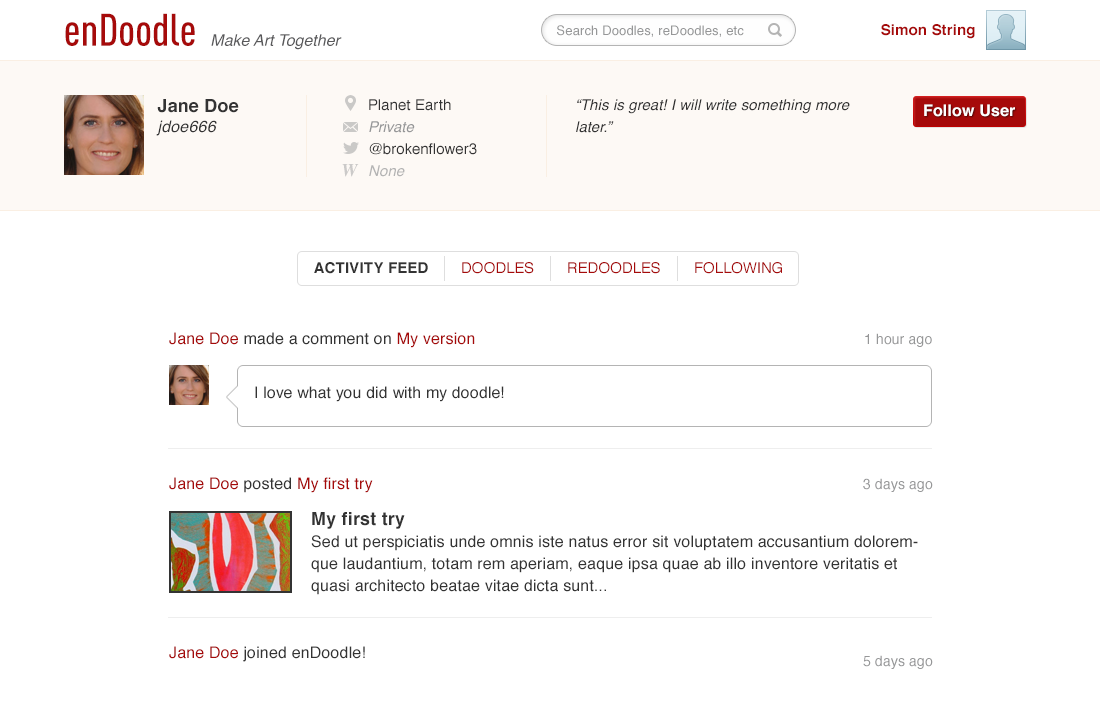
<style>
.page{position:relative;width:1100px;height:703px;background:#ffffff}
.page>*{position:absolute;margin:0}
.t1{font:45px "DINCond-Medium";color:#a60a0a}
.t2{font:13px "Helvetica";letter-spacing:0.01em;color:#969798}
.t3{font:15px "Helvetica-Bold";letter-spacing:0.01em;color:#a60a0a}
.t4{font:16px "Helvetica-Oblique";color:#59595b}
.t5{font:18px "Helvetica-Bold";letter-spacing:0.01em;color:#333333}
.t6{font:16px/20px "Helvetica-Oblique";letter-spacing:0.01em;color:#333333}
.t7{font:15px/22px "Helvetica";letter-spacing:0.01em;color:#333333}
.t8{font:15px/22px "Helvetica-Oblique";letter-spacing:0.01em;color:#969798}
.t9{font:15px/22px "Helvetica-Oblique";letter-spacing:0.01em;color:#b4b4b4}
.t10{font:15px/22px "Helvetica-Oblique";letter-spacing:0.01em;color:#333333}
.t11{font:16px "Helvetica-Bold";letter-spacing:0.01em;color:#ffffff}
.t12{font:18px "Times-BoldItalic";letter-spacing:0.01em;color:#b4b4b4}
.t13{font:15px "Helvetica-Bold";letter-spacing:0.01em;color:#333333}
.t14{font:15px "Helvetica";letter-spacing:0.01em;color:#a60a0a}
.t15{font:16px "Helvetica";letter-spacing:0.01em;color:#333333}
.t16{font:16px "Helvetica";letter-spacing:0.01em;color:#a60a0a}
.t17{font:14px "Helvetica";letter-spacing:0.01em;color:#969798}
.t18{font:16px/22px "Helvetica";letter-spacing:0.01em;color:#333333}
.t19{font:18px/24px "Helvetica-Bold";letter-spacing:0.01em;color:#333333}
</style>
<div class="page">
<p class="t1" style="left:65px;top:13px;width:130px;height:33px">enDoodle</p>
<p class="t2" style="left:557px;top:25px;width:187px;height:12px">Search Doodles, reDoodles, etc</p>
<p class="t3" style="left:881px;top:24px;width:94px;height:15px">Simon String</p>
<p class="t4" style="left:211px;top:34px;width:131px;height:16px">Make Art Together</p>
<p class="t5" style="left:156px;top:99px;width:83px;height:37px">Jane Doe<br><span class="t6">jdoe666</span></p>
<p class="t7" style="left:369px;top:99px;width:108px;height:78px">Planet Earth<br><span class="t8">Private<br></span>@brokenflower3<br><span class="t9">None</span></p>
<p class="t10" style="left:576px;top:99px;width:274px;height:34px">“This is great! I will write something more<br>later.”</p>
<p class="t11" style="left:924px;top:104px;width:91px;height:13px">Follow User</p>
<p class="t12" style="left:342px;top:164px;width:17px;height:13px;opacity:0.7">W</p>
<p class="t13" style="left:314px;top:262px;width:114px;height:12px">ACTIVITY FEED</p>
<p class="t14" style="left:462px;top:262px;width:72px;height:12px">DOODLES</p>
<p class="t14" style="left:568px;top:262px;width:92px;height:12px">REDOODLES</p>
<p class="t14" style="left:695px;top:262px;width:87px;height:12px">FOLLOWING</p>
<p class="t15" style="left:169px;top:332px;width:306px;height:16px"><span class="t16">Jane Doe </span>made a comment on <span class="t16">My version</span></p>
<p class="t17" style="left:865px;top:333px;width:67px;height:14px">1 hour ago</p>
<p class="t15" style="left:255px;top:386px;width:249px;height:16px">I love what you did with my doodle!</p>
<p class="t16" style="left:169px;top:477px;width:204px;height:16px">Jane Doe <span class="t15">posted </span>My first try</p>
<p class="t17" style="left:863px;top:478px;width:70px;height:14px">3 days ago</p>
<p class="t18" style="left:311px;top:512px;width:607px;height:83px"><span class="t19">My first try<br></span>Sed ut perspiciatis unde omnis iste natus error sit voluptatem accusantium doloremque laudantium, totam rem aperiam, eaque ipsa quae ab illo inventore veritatis et quasi architecto beatae vitae dicta sunt...</p>
<p class="t15" style="left:169px;top:646px;width:196px;height:16px"><span class="t16">Jane Doe</span> joined enDoodle!</p>
<p class="t17" style="left:863px;top:655px;width:70px;height:14px">5 days ago</p>
</div>
